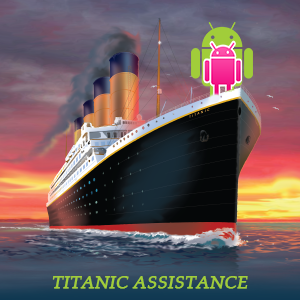
<style>
.page{position:relative;width:300px;height:300px}
.page>*{position:absolute;margin:0}
.t1{font:18px "BookAntiqua-Italic";color:#a1cd3a;font-weight:bold}
</style>
<div class="page">
<p class="t1" style="left:52px;top:276px;width:196px;height:13px">TITANIC ASSISTANCE</p>
</div>
